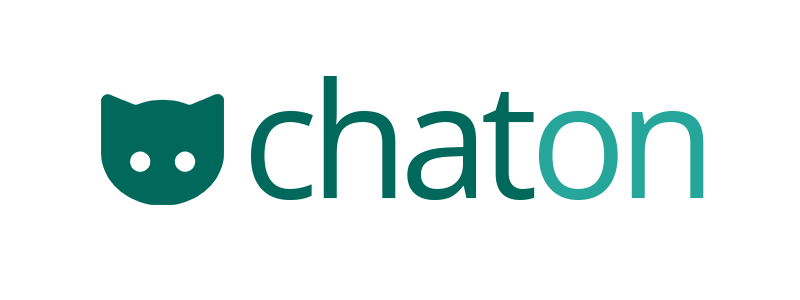
<style>
.page{position:relative;width:800px;height:300px;background:#ffffff}
.page>*{position:absolute;margin:0}
.t1{font:160px "OpenSans";letter-spacing:-0.05em;color:#00695c}
.t2{font:160px "OpenSans";letter-spacing:-0.05em;color:#26a69a}
</style>
<div class="page">
<p class="t1" style="left:250px;top:76px;width:454px;height:124px">chat<span class="t2">on</span></p>
</div>
